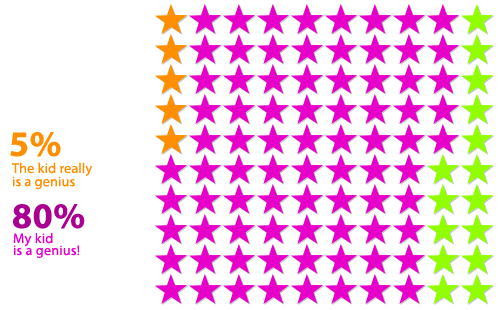
<style>
.page{position:relative;width:500px;height:310px;background:#ffffff}
.page>*{position:absolute;margin:0}
.t1{font:36px "MyriadPro-Bold";letter-spacing:0.02em;color:#ff8e00}
.t2{font:14px/13.2px "MyriadPro-Regular";letter-spacing:0.012em;color:#ff8e00}
.t3{font:36px "MyriadPro-Bold";letter-spacing:0.02em;color:#aa0091}
.t4{font:14px/12px "MyriadPro-Regular";letter-spacing:0.02em;color:#e600ca}
</style>
<div class="page">
<p class="t1" style="left:10px;top:132px;width:51px;height:25px">5%</p>
<p class="t2" style="left:12px;top:162px;width:81px;height:28px">The kid really <br>is a genius</p>
<p class="t3" style="left:13px;top:204px;width:72px;height:25px">80%</p>
<p class="t4" style="left:13px;top:233px;width:67px;height:25px">My kid <br>is a genius!</p>
</div>
